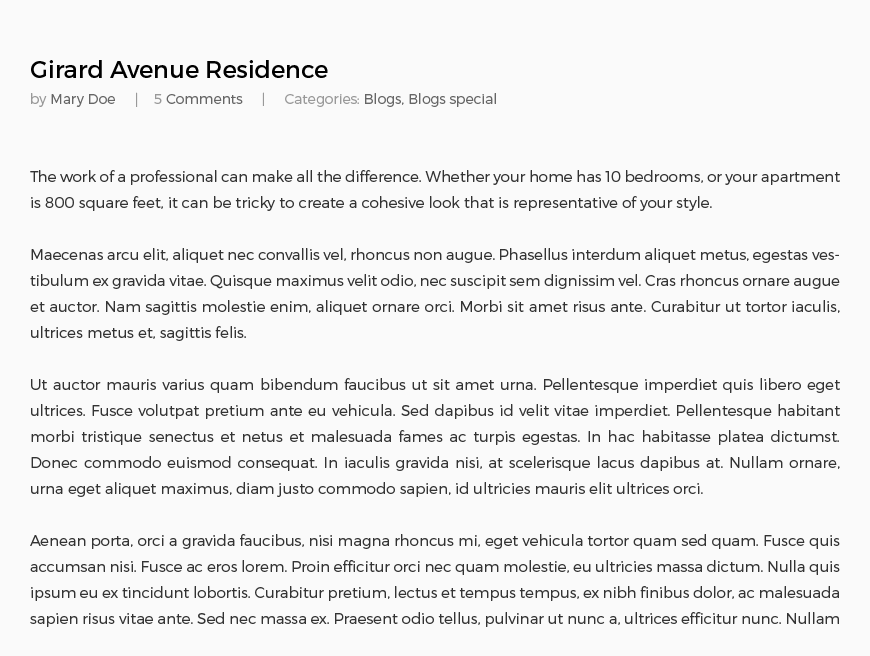
<style>
.page{position:relative;width:870px;height:656px;background:#fafafa}
.page>*{position:absolute;margin:0}
.t1{font:15px/26px "Montserrat-Light";color:#333333}
.t2{font:24px/26px "Montserrat-Regular";color:#000000}
.t3{font:14px/26px "Montserrat-Light";color:#999999}
.t4{font:14px/26px "Montserrat-Light";color:#666666}
.t5{font:14px/26px "MinionPro-Regular";color:#999999}
</style>
<div class="page">
<p class="t1" style="left:30px;top:60px;width:810px;height:567px"><span class="t2"><br>Girard Avenue Residence<br></span><span class="t3">by </span><span class="t4">Mary Doe     </span><span class="t5">|     </span><span class="t3">5 </span><span class="t4">Comments</span><span class="t3">     |     Categories: </span><span class="t4">Blogs, Blogs special<br><br></span><br>The work of a professional can make all the difference. Whether your home has 10 bedrooms, or your apartment is 800 square feet, it can be tricky to create a cohesive look that is representative of your style.<br><br>Maecenas arcu elit, aliquet nec convallis vel, rhoncus non augue. Phasellus interdum aliquet metus, egestas vestibulum ex gravida vitae. Quisque maximus velit odio, nec suscipit sem dignissim vel. Cras rhoncus ornare augue et auctor. Nam sagittis molestie enim, aliquet ornare orci. Morbi sit amet risus ante. Curabitur ut tortor iaculis, ultrices metus et, sagittis felis.<br><br>Ut auctor mauris varius quam bibendum faucibus ut sit amet urna. Pellentesque imperdiet quis libero eget ultrices. Fusce volutpat pretium ante eu vehicula. Sed dapibus id velit vitae imperdiet. Pellentesque habitant morbi tristique senectus et netus et malesuada fames ac turpis egestas. In hac habitasse platea dictumst. Donec commodo euismod consequat. In iaculis gravida nisi, at scelerisque lacus dapibus at. Nullam ornare, urna eget aliquet maximus, diam justo commodo sapien, id ultricies mauris elit ultrices orci.<br><br>Aenean porta, orci a gravida faucibus, nisi magna rhoncus mi, eget vehicula tortor quam sed quam. Fusce quis accumsan nisi. Fusce ac eros lorem. Proin efficitur orci nec quam molestie, eu ultricies massa dictum. Nulla quis ipsum eu ex tincidunt lobortis. Curabitur pretium, lectus et tempus tempus, ex nibh finibus dolor, ac malesuada sapien risus vitae ante. Sed nec massa ex. Praesent odio tellus, pulvinar ut nunc a, ultrices efficitur nunc. Nullam eleifend tincidunt nibh. Morbi vitae sem vel diam faucibus varius ut ac metus. Nunc non risus commodo, bibendum lacus eget, sodales magna. Curabitur bibendum ligula eget nulla tempus vehicula.</p>
</div>
